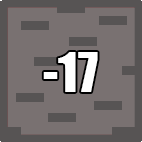
<style>
.page{position:relative;width:142px;height:142px;background:#797171}
.page>*{position:absolute;margin:0}
.t1{font:51px "Impact";color:#ffffff}
</style>
<div class="page">
<p class="t1" style="left:43px;top:52px;width:55px;height:40px">-17</p>
</div>
